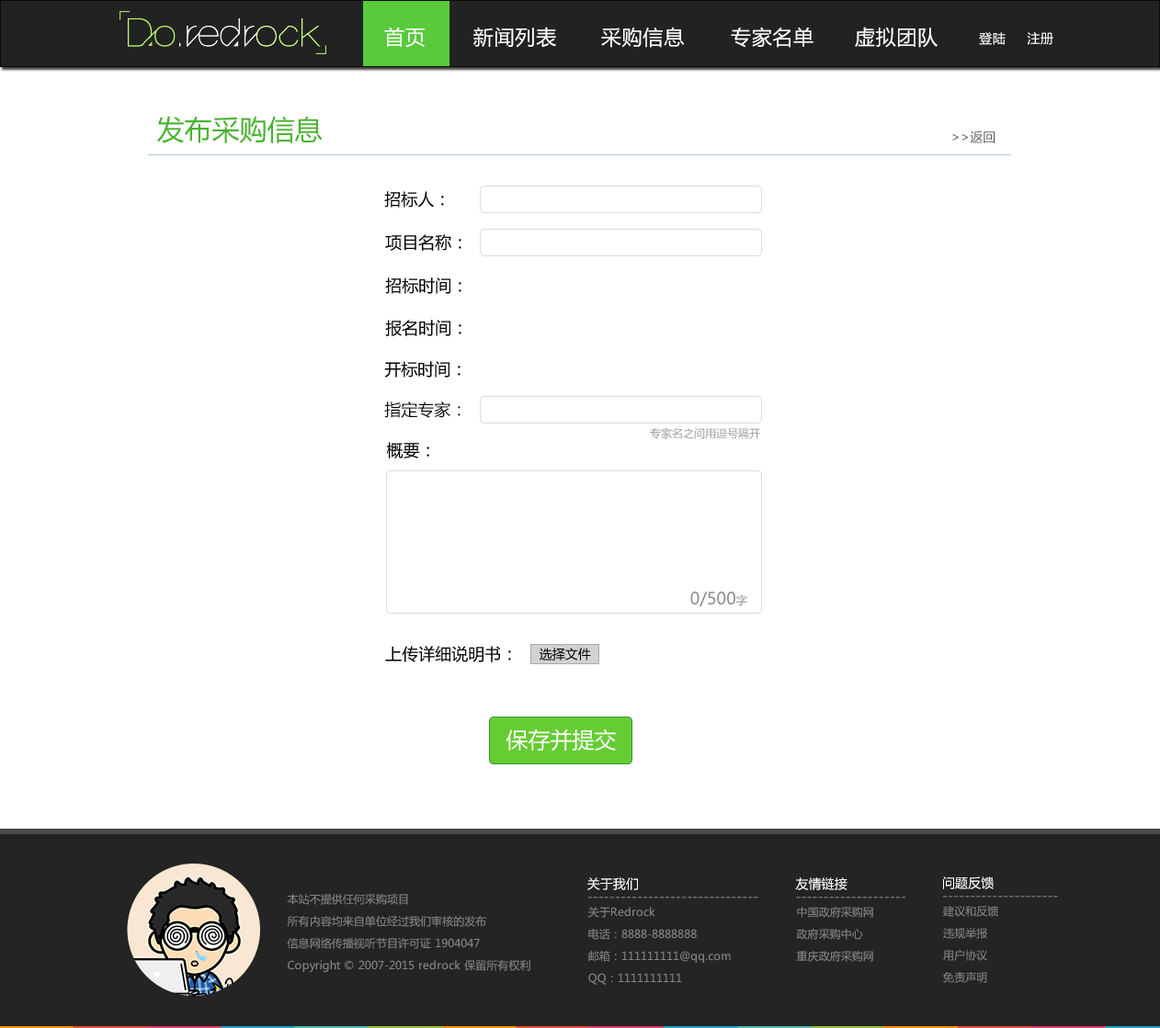
<style>
.page{position:relative;width:1160px;height:1028px;background:#ffffff}
.page>*{position:absolute;margin:0}
.t1{font:20.2px "MicrosoftYaHei";letter-spacing:0.035em;color:#ffffff}
.t2{font:12.9px "MicrosoftYaHei";letter-spacing:0.035em;color:#ffffff}
.t3{font:27.6px "MicrosoftYaHei";color:#48b42c}
.t4{font:12.9px "MicrosoftYaHei";color:#5b5b5b}
.t5{font:16.5px "MicrosoftYaHeiUI";color:#000000}
.t6{font:16.5px "MicrosoftYaHei";color:#000000}
.t7{font:11px "MicrosoftYaHei";color:#999999}
.t8{font:16.5px "MicrosoftYaHeiUI";color:#8e8e8e}
.t9{font:11px "MicrosoftYaHeiUI";color:#8e8e8e}
.t10{font:12.9px "MicrosoftYaHeiUI";color:#000000}
.t11{font:22.1px "MicrosoftYaHeiUI";color:#ffffff}
.t12{font:12.9px "MicrosoftYaHei";color:#ffffff}
.t13{font:11px/22.1px "MicrosoftYaHei";color:#858585}
.t14{font:12.9px "MicrosoftYaHei";color:#858585}
</style>
<div class="page">
<p class="t1" style="left:384px;top:27px;width:41px;height:21px">首页</p>
<p class="t1" style="left:473px;top:27px;width:83px;height:21px">新闻列表</p>
<p class="t1" style="left:601px;top:27px;width:84px;height:21px">采购信息</p>
<p class="t1" style="left:731px;top:27px;width:82px;height:21px">专家名单</p>
<p class="t1" style="left:855px;top:27px;width:82px;height:21px">虚拟团队</p>
<p class="t2" style="left:979px;top:32px;width:74px;height:13px">登陆     注册</p>
<p class="t3" style="left:157px;top:116px;width:166px;height:27px">发布采购信息</p>
<p class="t4" style="left:952px;top:130px;width:43px;height:13px">&gt;&gt;返回</p>
<p class="t5" style="left:384px;top:191px;width:60px;height:17px">招标人：</p>
<p class="t5" style="left:385px;top:234px;width:76px;height:17px">项目名称：</p>
<p class="t5" style="left:385px;top:278px;width:76px;height:16px">招标时间：</p>
<p class="t5" style="left:385px;top:320px;width:76px;height:16px">报名时间：</p>
<p class="t5" style="left:384px;top:361px;width:76px;height:17px">开标时间：</p>
<p class="t6" style="left:384px;top:402px;width:76px;height:16px">指定专家：</p>
<p class="t7" style="left:650px;top:427px;width:110px;height:12px">专家名之间用逗号隔开</p>
<p class="t5" style="left:386px;top:442px;width:43px;height:17px">概要：</p>
<p class="t8" style="left:690px;top:592px;width:57px;height:14px">0/500<span class="t9">字</span></p>
<p class="t5" style="left:385px;top:646px;width:126px;height:17px">上传详细说明书：</p>
<p class="t10" style="left:539px;top:648px;width:52px;height:13px">选择文件</p>
<p class="t11" style="left:505px;top:729px;width:111px;height:23px">保存并提交</p>
<p class="t12" style="left:587px;top:878px;width:51px;height:12px">关于我们</p>
<p class="t12" style="left:795px;top:878px;width:52px;height:12px">友情链接</p>
<p class="t12" style="left:943px;top:877px;width:50px;height:13px">问题反馈</p>
<p class="t13" style="left:287px;top:894px;width:243px;height:78px">本站不提供任何采购项目<br>所有内容均来自单位经过我们审核的发布<br>信息网络传播视听节目许可证 1904047<br>Copyright © 2007-2015 redrock 保留所有权利</p>
<p class="t14" style="left:587px;top:897px;width:171px;height:2px">-------------------------------</p>
<p class="t14" style="left:796px;top:897px;width:109px;height:2px">--------------------</p>
<p class="t14" style="left:943px;top:896px;width:115px;height:2px">---------------------</p>
<p class="t13" style="left:588px;top:907px;width:143px;height:78px">关于Redrock<br>电话：8888-8888888<br>邮箱：111111111@qq.com<br>QQ：1111111111</p>
<p class="t13" style="left:796px;top:907px;width:77px;height:55px">中国政府采购网<br>政府采购中心<br>重庆政府采购网</p>
<p class="t13" style="left:943px;top:906px;width:55px;height:77px">建议和反馈<br>违规举报<br>用户协议<br>免责声明</p>
</div>
